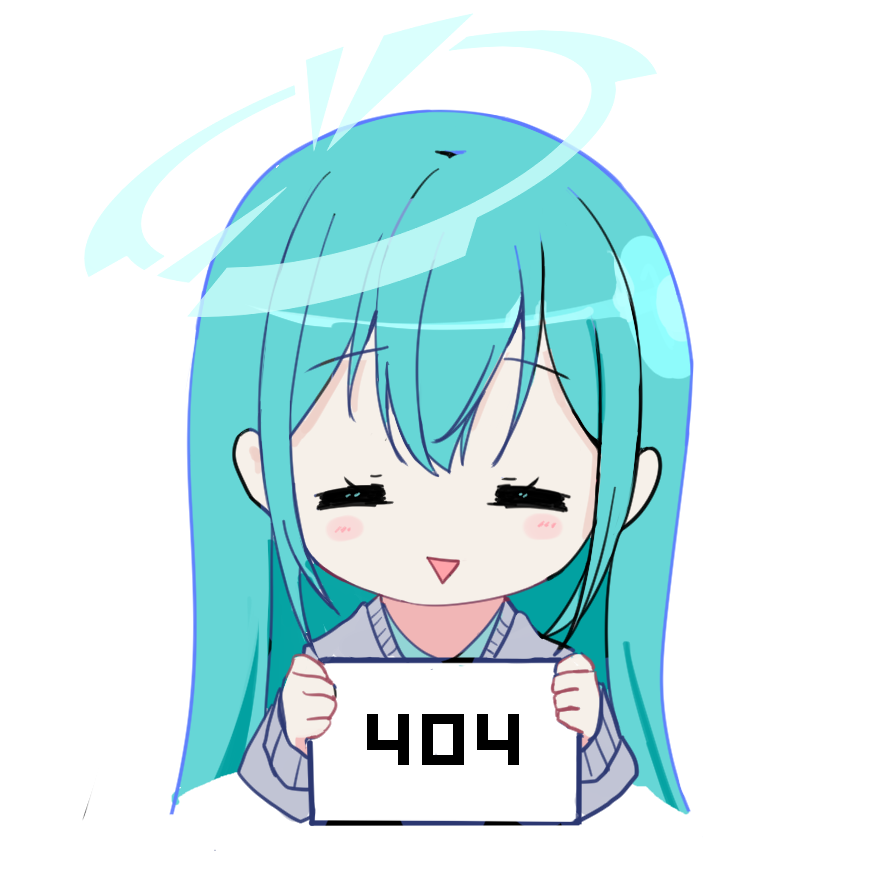
<style>
.page{position:relative;width:886px;height:896px;background:#ffffff}
.page>*{position:absolute;margin:0}
.t1{font:72px "BigruixianBlackGBV1.0";color:#000000}
</style>
<div class="page">
<p class="t1" style="left:367px;top:714px;width:152px;height:51px">404</p>
</div>
